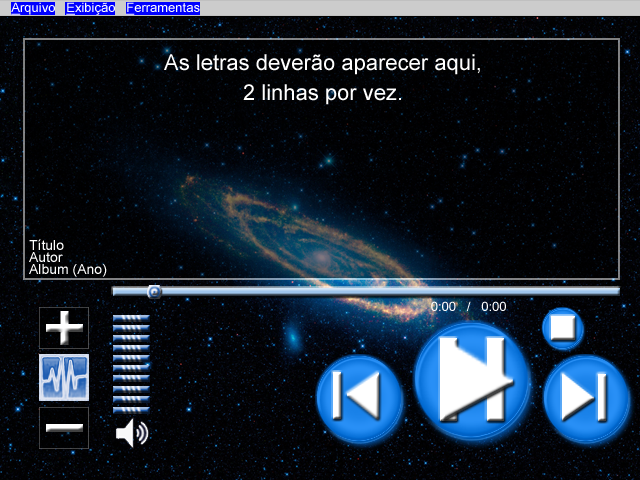
<style>
.page{position:relative;width:640px;height:480px}
.page>*{position:absolute;margin:0}
.t1{font:13px "ArialMT";color:#ffffff}
.t2{font:13px "ArialMT";color:#ffffff;text-decoration:underline}
.t3{font:22px/30px "ArialMT";color:#ffffff}
.t4{font:14px/12px "ArialMT";color:#ffffff}
</style>
<div class="page">
<p class="t1" style="left:11px;top:2px;width:189px;height:13px"><span class="t2">A</span>rquivo   <span class="t2">E</span>xibição   <span class="t2">F</span>erramentas</p>
<p class="t3" style="left:164px;top:54px;width:316px;height:51px;text-align:center">As letras deverão aparecer aqui,<br>2 linhas por vez.</p>
<p class="t4" style="left:29px;top:239px;width:78px;height:38px">Título<br>Autor<br>Album (Ano)</p>
<p class="t1" style="left:431px;top:301px;width:75px;height:10px">0:00   /   0:00</p>
</div>
